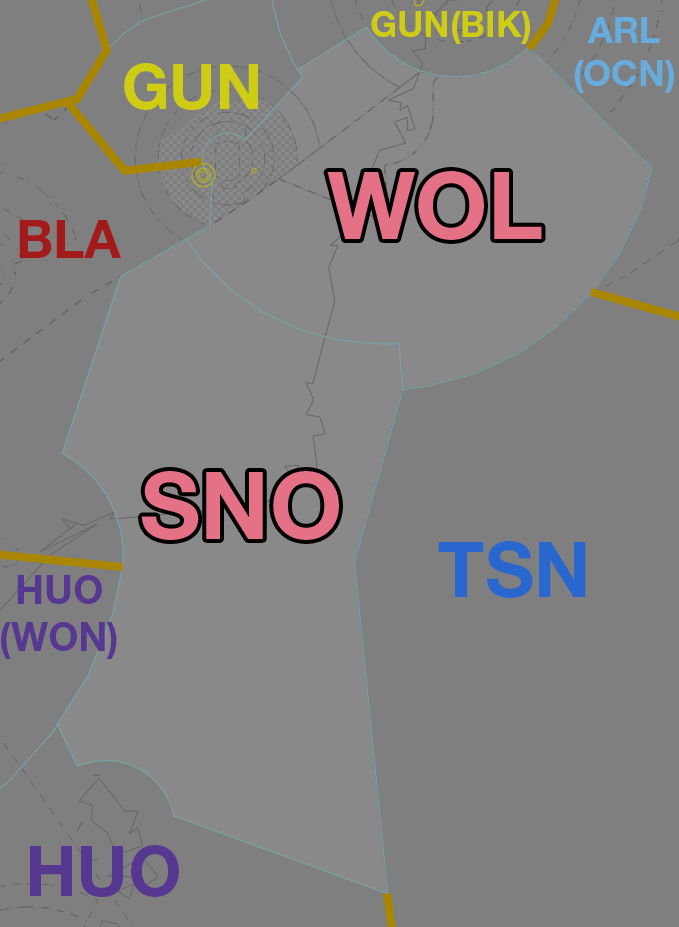
<style>
.page{position:relative;width:679px;height:927px;background:#7f7f7f}
.page>*{position:absolute;margin:0}
.t1{font:35.3px "HelveticaNeueLTStd-Bd";color:#cecc13}
.t2{font:35.9px "HelveticaNeueLTStd-Bd";color:#67acdc}
.t3{font:62.6px "HelveticaNeueLTStd-Bd";color:#cecc13}
.t4{font:93.5px "HelveticaNeueLTStd-Bd";color:#e57187}
.t5{font:53.2px "HelveticaNeueLTStd-Bd";color:#a31a1a}
.t6{font:76.3px "HelveticaNeueLTStd-Bd";color:#2967cf}
.t7{font:39.6px "HelveticaNeueLTStd-Bd";color:#573890}
.t8{font:69.7px "HelveticaNeueLTStd-Bd";color:#573890}
</style>
<div class="page">
<p class="t1" style="left:371px;top:11px;width:159px;height:33px">GUN(BIK)</p>
<p class="t2" style="left:574px;top:17px;width:100px;height:76px;text-align:center">ARL<br>(OCN)</p>
<p class="t3" style="left:124px;top:63px;width:134px;height:47px">GUN</p>
<p class="t4" style="left:327px;top:171px;width:215px;height:69px">WOL</p>
<p class="t5" style="left:19px;top:220px;width:102px;height:38px">BLA</p>
<p class="t4" style="left:142px;top:471px;width:197px;height:69px">SNO</p>
<p class="t6" style="left:438px;top:541px;width:148px;height:57px">TSN</p>
<p class="t7" style="left:1px;top:575px;width:116px;height:84px;text-align:center">HUO<br>(WON)</p>
<p class="t8" style="left:30px;top:845px;width:149px;height:52px">HUO</p>
</div>
